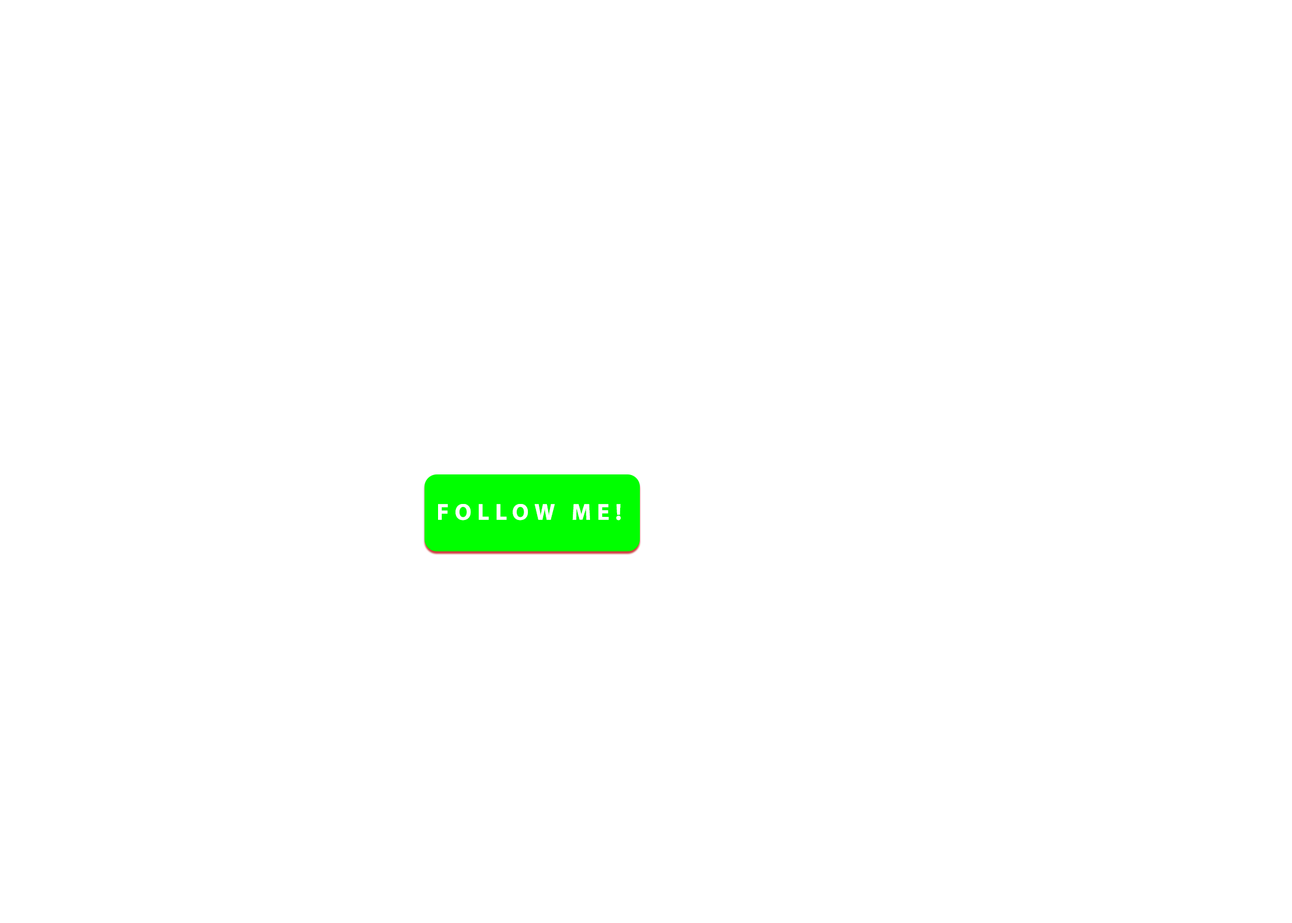
<style>
.page{position:relative;width:1292px;height:923px;background:#ffffff}
.page>*{position:absolute;margin:0}
.t1{font:23.1px "MyriadPro-Bold";letter-spacing:0.26em;color:#ffffff;text-transform:uppercase}
</style>
<div class="page">
<p class="t1" style="left:438px;top:504px;width:183px;height:17px">FOLLOW ME!</p>
</div>
